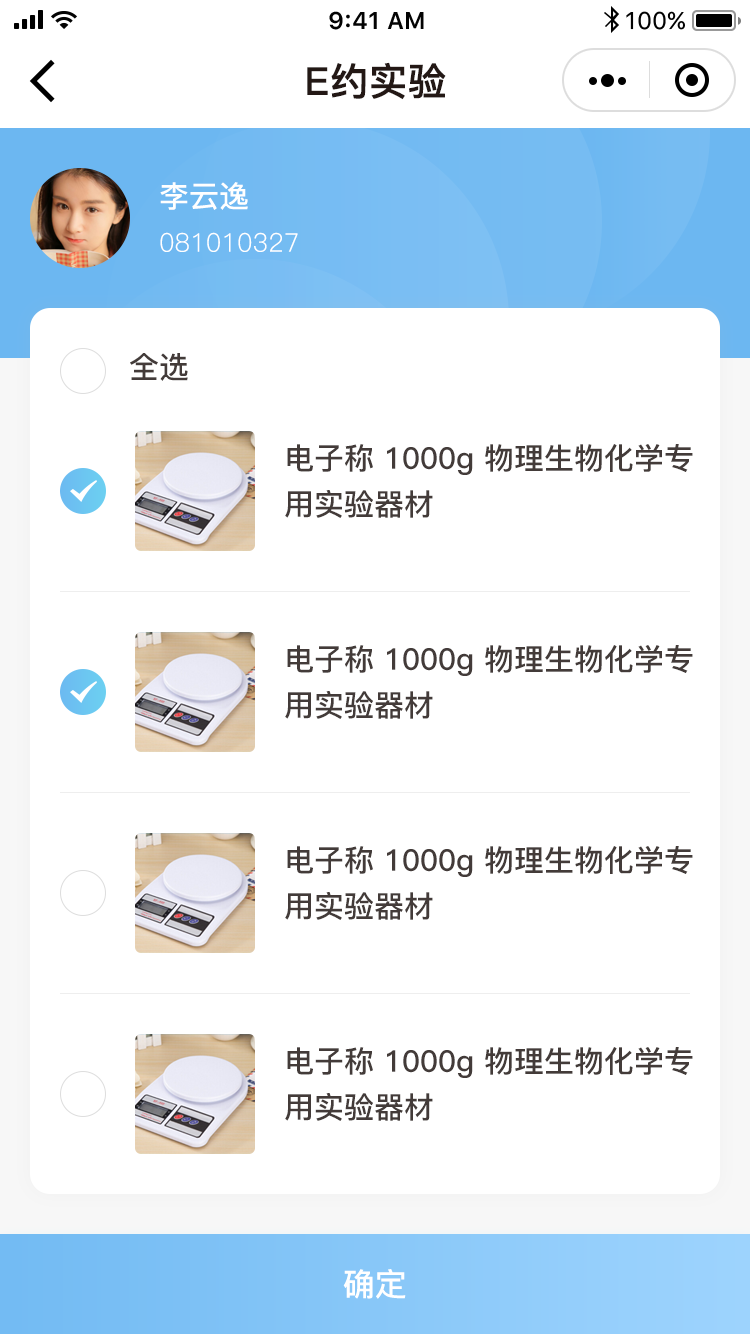
<style>
.page{position:relative;width:750px;height:1334px;background:#ffffff}
.page>*{position:absolute;margin:0}
.t1{font:38px "PingFang-SC-Bold";color:#231815;font-weight:bold}
.t2{font:30px "PingFang-SC-Bold";color:#ffffff}
.t3{font:26px "PingFang-SC-Regular";color:#ffffff}
.t4{font:30px "PingFang-SC-Bold";color:#433b39}
.t5{font:30px/46px "PingFang-SC-Bold";color:#433b39}
.t6{font:32px "PingFang-SC-Bold";color:#ffffff}
</style>
<div class="page">
<p class="t1" style="left:307px;top:62px;width:139px;height:38px">E约实验</p>
<p class="t2" style="left:160px;top:182px;width:88px;height:28px">李云逸</p>
<p class="t3" style="left:160px;top:232px;width:138px;height:20px">081010327</p>
<p class="t4" style="left:130px;top:353px;width:58px;height:28px">全选</p>
<p class="t5" style="left:285px;top:444px;width:408px;height:74px">电子称 1000g 物理生物化学专<br>用实验器材</p>
<p class="t5" style="left:285px;top:645px;width:408px;height:74px">电子称 1000g 物理生物化学专<br>用实验器材</p>
<p class="t5" style="left:285px;top:846px;width:408px;height:74px">电子称 1000g 物理生物化学专<br>用实验器材</p>
<p class="t5" style="left:285px;top:1047px;width:408px;height:74px">电子称 1000g 物理生物化学专<br>用实验器材</p>
<p class="t6" style="left:343px;top:1269px;width:63px;height:30px">确定</p>
</div>
